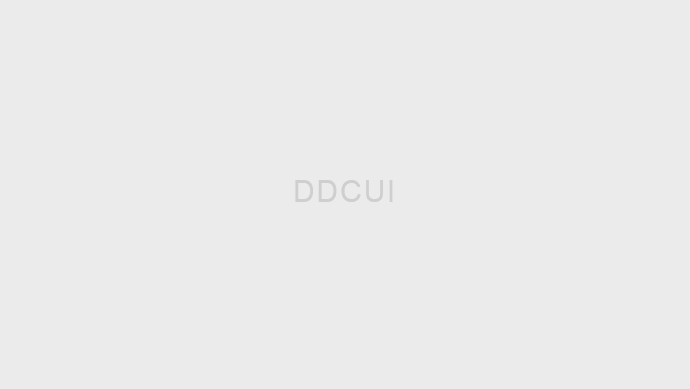
<style>
.page{position:relative;width:690px;height:389px;background:#ebebeb}
.page>*{position:absolute;margin:0}
.t1{font:30px "ArialMT";letter-spacing:0.05em;color:#cfcfcf}
</style>
<div class="page">
<p class="t1" style="left:295px;top:180px;width:98px;height:22px">DDCUI</p>
</div>
